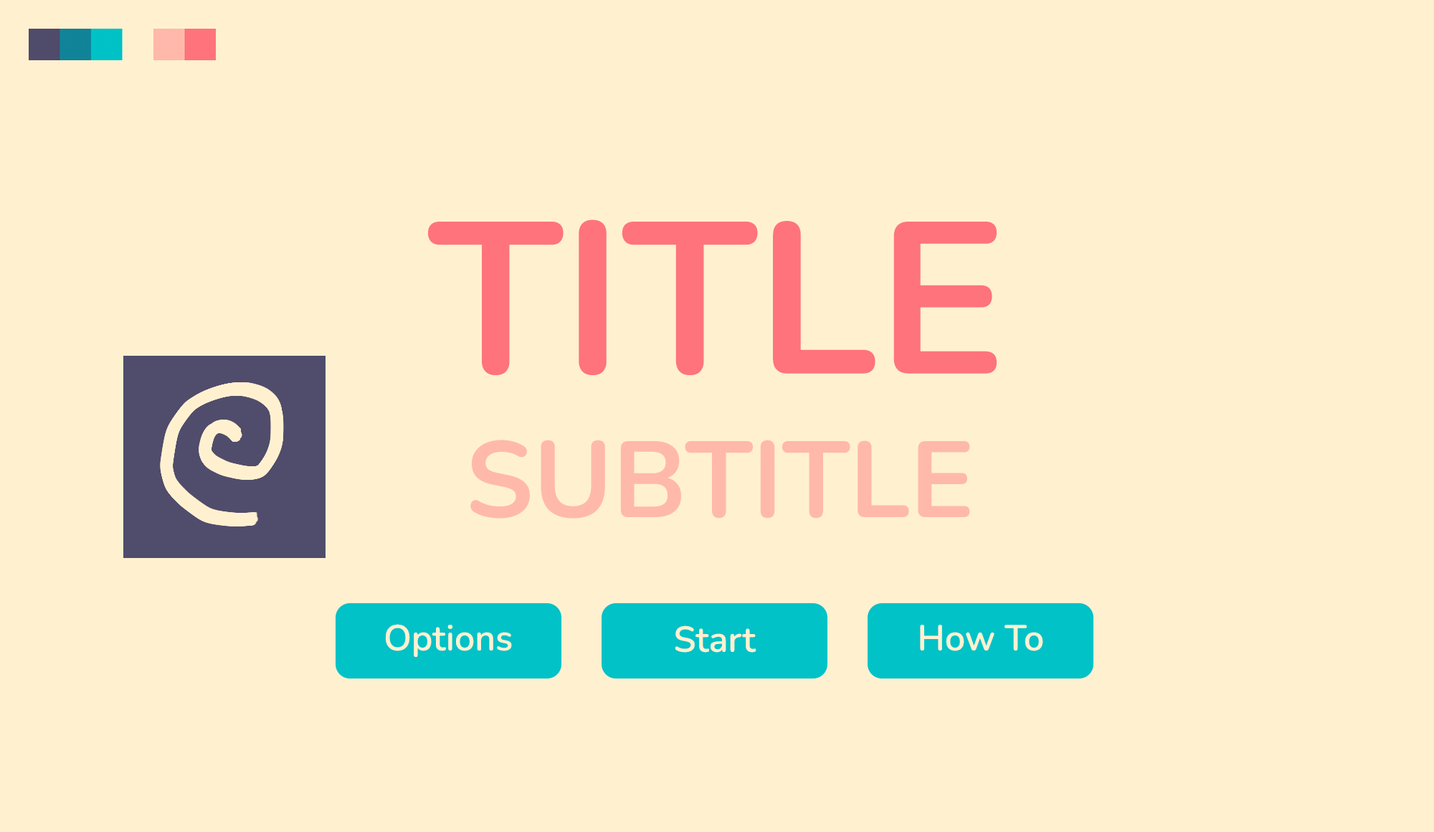
<style>
.page{position:relative;width:1434px;height:832px;background:#fff1d0}
.page>*{position:absolute;margin:0}
.t1{font:215.1px "Nunito-Bold";color:#ff737d;font-weight:bold}
.t2{font:107.5px "Nunito-Bold";color:#ffb9ab;font-weight:bold}
.t3{font:35.8px "Nunito-SemiBold";color:#fff1d0;font-weight:bold}
</style>
<div class="page">
<p class="t1" style="left:428px;top:219px;width:569px;height:156px">TITLE</p>
<p class="t2" style="left:470px;top:439px;width:500px;height:79px">SUBTITLE</p>
<p class="t3" style="left:386px;top:624px;width:126px;height:33px">Options</p>
<p class="t3" style="left:675px;top:625px;width:81px;height:27px">Start</p>
<p class="t3" style="left:920px;top:624px;width:123px;height:27px">How To</p>
</div>
